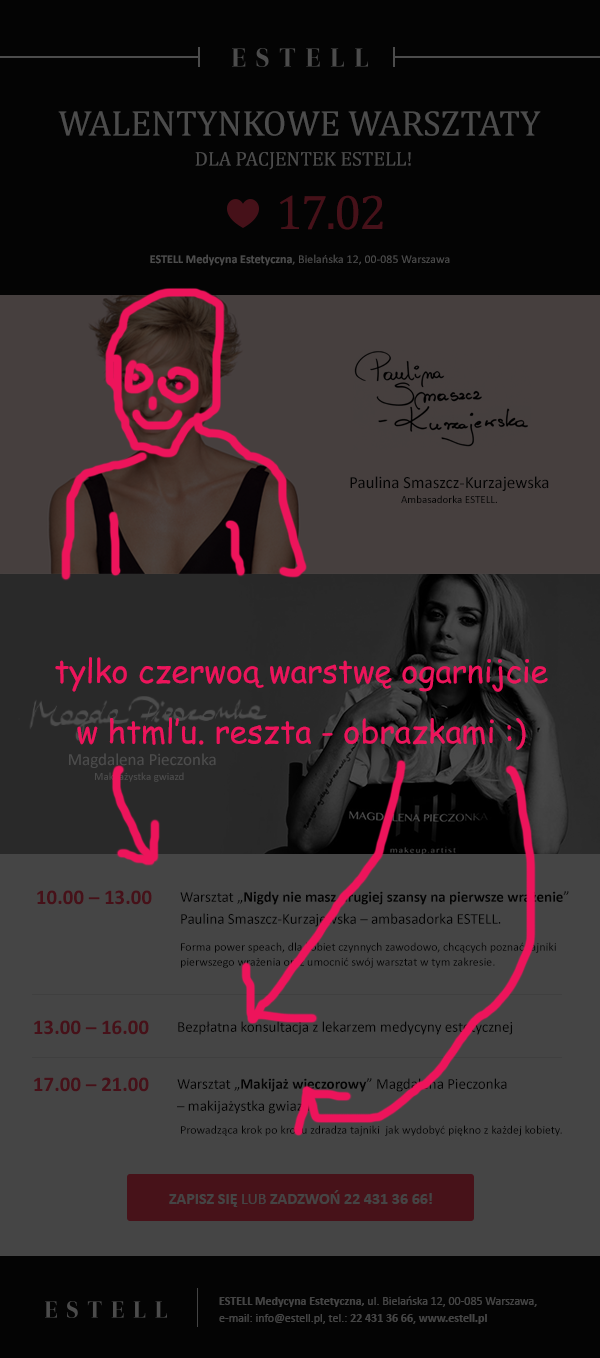
<style>
.page{position:relative;width:600px;height:1358px;background:#040404}
.page>*{position:absolute;margin:0}
.t1{font:36px/33px "CambriaMath";color:#4c4c4c;text-transform:uppercase}
.t2{font:20px/30px "CambriaMath";color:#4c4c4c;text-transform:uppercase}
.t3{font:49px "CambriaMath";letter-spacing:-0.04em;color:#461119;text-transform:uppercase}
.t4{font:12px "Calibri";color:#4c4c4c}
.t5{font:12px "Calibri-Bold";color:#4c4c4c}
.t6{font:17px "Calibri";color:#0d0d0d}
.t7{font:11px "Calibri";color:#0d0d0d}
.t8{font:17px "Calibri";color:#4c4c4c}
.t9{font:11px "Calibri";color:#4c4c4c}
.t10{font:21px "Calibri-Bold";color:#461119}
.t11{font:15px/22px "Calibri";color:#0d0d0d}
.t12{font:15px/22px "Calibri-Bold";color:#0d0d0d}
.t13{font:12px/15px "Calibri";color:#0d0d0d}
.t14{font:15px "Calibri";color:#0d0d0d}
.t15{font:12px "Calibri";color:#0d0d0d}
.t16{font:16px "Calibri-Bold";color:#454545;text-transform:uppercase}
.t17{font:16px "Calibri";color:#454545;text-transform:uppercase}
.t18{font:12px/16.7px "Calibri";color:#454545}
.t19{font:12px/16.7px "Calibri-Bold";color:#454545}
</style>
<div class="page">
<p class="t1" style="left:58px;top:111px;width:483px;height:59px;text-align:center">WALENTYNKOWE WARSZTATY <br><span class="t2">DLA PACJENTEK ESTELL!</span></p>
<p class="t3" style="left:280px;top:195px;width:103px;height:35px">17.02</p>
<p class="t4" style="left:150px;top:254px;width:300px;height:12px"><span class="t5">ESTELL Medycyna Estetyczna</span>, Bielańska 12, 00-085 Warszawa</p>
<p class="t6" style="left:350px;top:476px;width:199px;height:15px">Paulina Smaszcz-Kurzajewska</p>
<p class="t7" style="left:401px;top:495px;width:96px;height:8px">Ambasadorka ESTELL.</p>
<p class="t8" style="left:69px;top:753px;width:147px;height:15px">Magdalena Pieczonka</p>
<p class="t9" style="left:95px;top:772px;width:89px;height:10px">Makijażystka gwiazd</p>
<p class="t10" style="left:37px;top:890px;width:115px;height:15px">10.00 – 13.00</p>
<p class="t11" style="left:180px;top:891px;width:389px;height:36px">Warsztat „<span class="t12">Nigdy nie masz drugiej szansy na pierwsze wrażenie</span>” Paulina Smaszcz-Kurzajewska – ambasadorka ESTELL.</p>
<p class="t13" style="left:181px;top:942px;width:375px;height:26px">Forma power speach, dla kobiet czynnych zawodowo, chcących poznać tajniki pierwszego wrażenia oraz umocnić swój warsztat w tym zakresie.</p>
<p class="t10" style="left:34px;top:1020px;width:115px;height:15px">13.00 – 16.00</p>
<p class="t14" style="left:178px;top:1021px;width:334px;height:14px">Bezpłatna konsultacja z lekarzem medycyny estetycznej</p>
<p class="t10" style="left:34px;top:1077px;width:115px;height:15px">17.00 – 21.00</p>
<p class="t11" style="left:177px;top:1078px;width:330px;height:36px">Warsztat „<span class="t12">Makijaż wieczorowy</span>” Magdalena Pieczonka <br>– makijażystka gwiazd.</p>
<p class="t15" style="left:181px;top:1125px;width:381px;height:11px">Prowadząca krok po kroku zdradza tajniki  jak wydobyć piękno z każdej kobiety.</p>
<p class="t16" style="left:169px;top:1190px;width:263px;height:17px">ZAPISZ SIĘ <span class="t17">lub </span>ZADZWOŃ 22 431 36 66!</p>
<p class="t18" style="left:219px;top:1296px;width:318px;height:28px"><span class="t19">ESTELL Medycyna Estetyczna,</span> ul. Bielańska 12, 00-085 Warszawa,<br>e-mail: info@estell.pl, tel.: <span class="t19">22 431 36 66</span>, <span class="t19">www.estell.pl</span></p>
</div>
